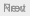
<style>
.page{position:relative;width:30px;height:16px;background:#eeeeee}
.page>*{position:absolute;margin:0}
.t1{font:11px "ArialMT";color:#909090}
</style>
<div class="page">
<p class="t1" style="left:4px;top:3px;width:22px;height:9px">Prev</p>
<p class="t1" style="left:4px;top:3px;width:22px;height:9px">Next</p>
</div>
